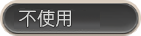
<style>
.page{position:relative;width:141px;height:36px}
.page>*{position:absolute;margin:0}
.t1{font:18px "GothicMB101Pr6N-Light";color:#d5d6d4}
</style>
<div class="page">
<p class="t1" style="left:19px;top:10px;width:52px;height:17px">不使用</p>
</div>
